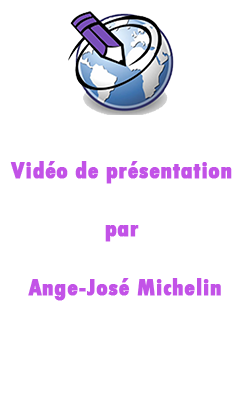
<style>
.page{position:relative;width:250px;height:400px;background:#ffffff}
.page>*{position:absolute;margin:0}
.t1{font:25px/58.3px "TwCenMT-CondensedExtraBold";color:#c252e7;font-weight:bold}
</style>
<div class="page">
<p class="t1" style="left:10px;top:161px;width:222px;height:140px;text-align:center">Vidéo de présentation <br>par <br>Ange-José Michelin</p>
</div>
